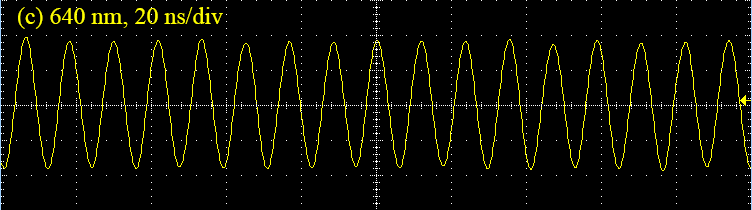
<style>
.page{position:relative;width:752px;height:210px;background:#000000}
.page>*{position:absolute;margin:0}
.t1{font:24px "TimesNewRomanPSMT";color:#ffff00}
</style>
<div class="page">
<p class="t1" style="left:18px;top:7px;width:205px;height:22px">(c) 640 nm, 20 ns/div</p>
</div>
